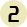
<style>
.page{position:relative;width:27px;height:27px;background:#ede8bb}
.page>*{position:absolute;margin:0}
.t1{font:20px "Unispace-Bold";color:#000000}
</style>
<div class="page">
<p class="t1" style="left:8px;top:6px;width:11px;height:16px">2</p>
</div>
